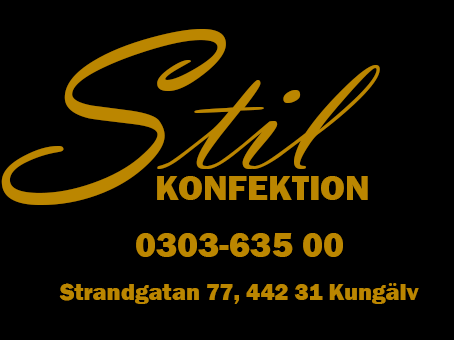
<style>
.page{position:relative;width:454px;height:340px;background:#000000}
.page>*{position:absolute;margin:0}
.t1{font:250px "VladimirScript";color:#bb8600}
.t2{font:180px "VladimirScript";color:#bb8600}
.t3{font:36px "FranklinGothic-Heavy";color:#bb8600}
.t4{font:24px "FranklinGothic-Heavy";color:#bb8600}
</style>
<div class="page">
<p class="t1" style="left:1px;top:29px;width:225px;height:176px">S</p>
<p class="t2" style="left:157px;top:65px;width:223px;height:104px">til</p>
<p class="t3" style="left:157px;top:176px;width:211px;height:24px">KONFEKTION</p>
<p class="t3" style="left:136px;top:233px;width:207px;height:24px">0303-635 00</p>
<p class="t4" style="left:59px;top:283px;width:360px;height:21px">Strandgatan 77, 442 31 Kungälv</p>
</div>
